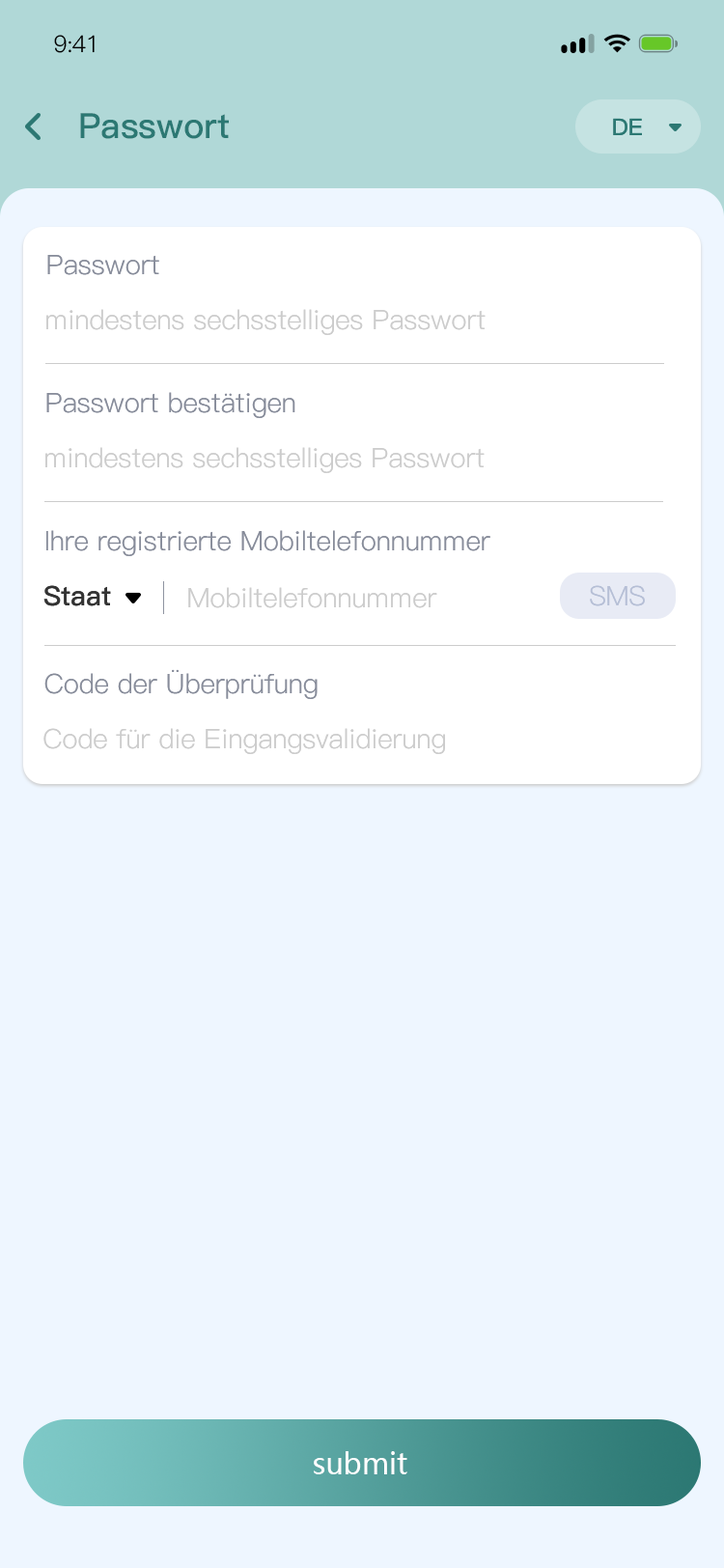
<style>
.page{position:relative;width:724px;height:1568px;background:#eef6ff}
.page>*{position:absolute;margin:0}
.t1{font:23.2px "PingFang-SC-Regular";letter-spacing:-0.025em;color:#000000}
.t2{font:34.8px "PingFang-SC-Bold";color:#2c7873}
.t3{font:34.8px "PingFang-SC-Bold";color:#2c7873;text-transform:uppercase}
.t4{font:23.2px "PingFang-SC-Bold";color:#2c7873}
.t5{font:27px "PingFang-SC-Regular";color:#878c9a}
.t6{font:27px "PingFang-SC-Regular";color:#878c9a;text-transform:uppercase}
.t7{font:27px "PingFang-SC-Regular";color:#cccccc}
.t8{font:27px "PingFang-SC-Bold";color:#333333}
.t9{font:27px "PingFang-SC-Bold";color:#333333;text-transform:uppercase}
.t10{font:27px "PingFang-SC-Regular";color:#b6bfd6;text-transform:uppercase}
.t11{font:29px "MicrosoftYaHei";color:#ffffff}
</style>
<div class="page">
<p class="t1" style="left:54px;top:35px;width:41px;height:18px">9:41</p>
<p class="t2" style="left:80px;top:113px;width:149px;height:26px"><span class="t3">P</span>asswort</p>
<p class="t4" style="left:613px;top:118px;width:29px;height:17px">DE</p>
<p class="t5" style="left:47px;top:255px;width:112px;height:20px"><span class="t6">P</span>asswort</p>
<p class="t7" style="left:46px;top:309px;width:440px;height:26px">mindestens sechsstelliges Passwort</p>
<p class="t5" style="left:46px;top:392px;width:249px;height:26px"><span class="t6">P</span>asswort bestätigen</p>
<p class="t7" style="left:45px;top:447px;width:440px;height:26px">mindestens sechsstelliges Passwort</p>
<p class="t5" style="left:46px;top:530px;width:444px;height:26px">Ihre registrierte Mobiltelefonnummer</p>
<p class="t8" style="left:43px;top:585px;width:68px;height:21px"><span class="t9">S</span>taat</p>
<p class="t7" style="left:188px;top:587px;width:249px;height:21px">Mobiltelefonnummer</p>
<p class="t10" style="left:590px;top:585px;width:55px;height:21px">SMS</p>
<p class="t5" style="left:44px;top:669px;width:274px;height:30px"><span class="t6">C</span>ode der Überprüfung</p>
<p class="t7" style="left:43px;top:728px;width:402px;height:26px">Code für die Eingangsvalidierung</p>
<p class="t11" style="left:314px;top:1451px;width:93px;height:23px">submit</p>
</div>
